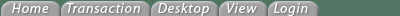
<style>
.page{position:relative;width:400px;height:16px;background:#527463}
.page>*{position:absolute;margin:0}
.t1{font:13.6px "MyriadPro-It";letter-spacing:0.05em;color:#ffffff;scale:1.05 1}
</style>
<div class="page">
<p class="t1" style="left:12px;top:2px;width:307px;height:14px">Home     Transaction     Desktop     View     Login</p>
</div>
